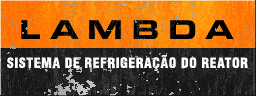
<style>
.page{position:relative;width:256px;height:96px}
.page>*{position:absolute;margin:0}
.t1{font:13.5px "HelveticaLT-Condensed-Black";letter-spacing:0.05em;color:#ffffff}
</style>
<div class="page">
<p class="t1" style="left:7px;top:55px;width:241px;height:16px">SISTEMA DE REFRIGERAÇÃO DO REATOR</p>
</div>
